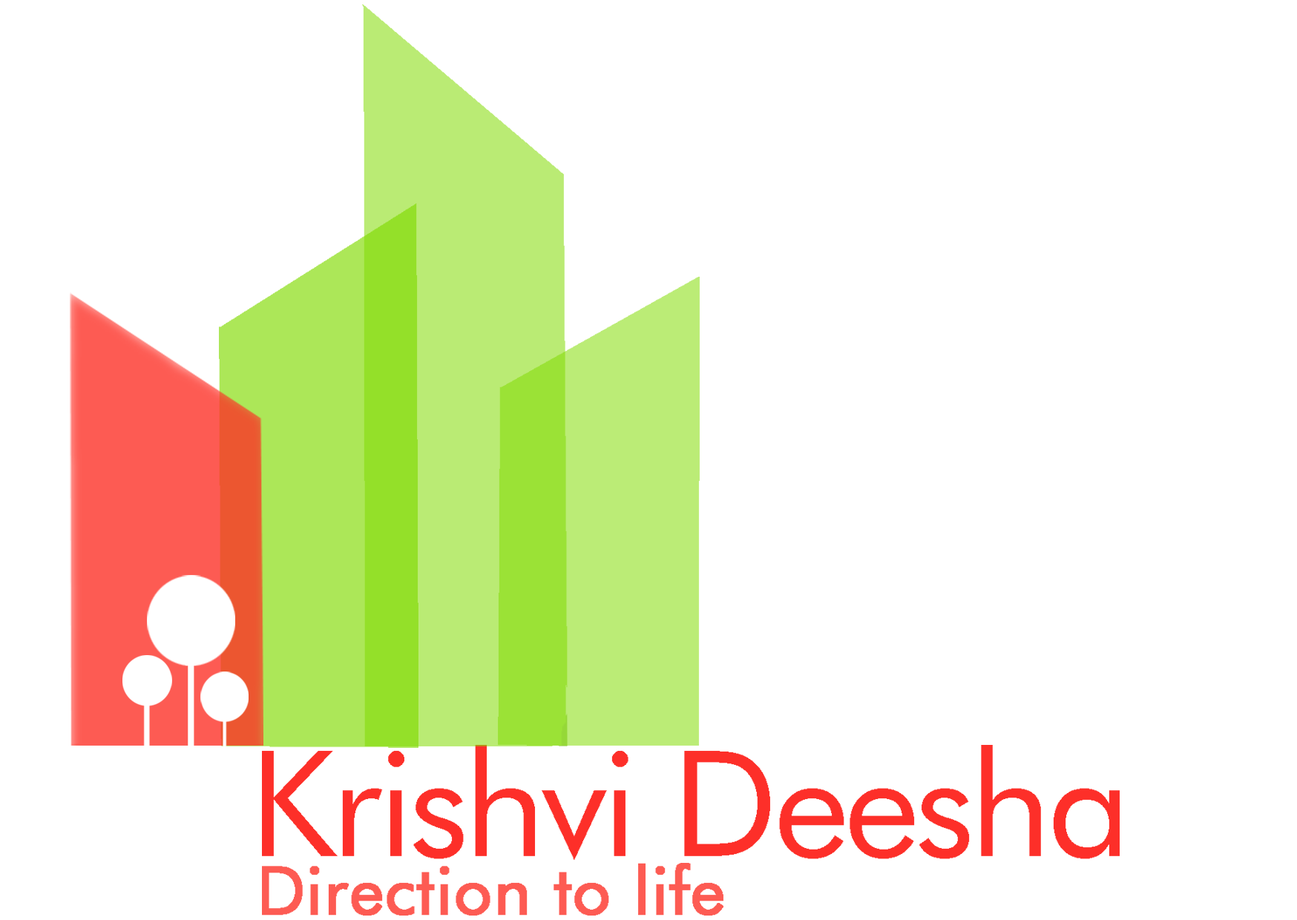
<style>
.page{position:relative;width:1297px;height:920px;background:#ffffff}
.page>*{position:absolute;margin:0}
.t1{font:146.7px "FuturaBT-Book";letter-spacing:-0.032em;color:#fd2f29}
.t2{font:66.5px "FuturaBT-Book";color:#fd5b53;font-weight:bold}
</style>
<div class="page">
<p class="t1" style="left:262px;top:745px;width:857px;height:115px">Krishvi Deesha</p>
<p class="t2" style="left:262px;top:863px;width:461px;height:52px">Direction to life</p>
</div>
